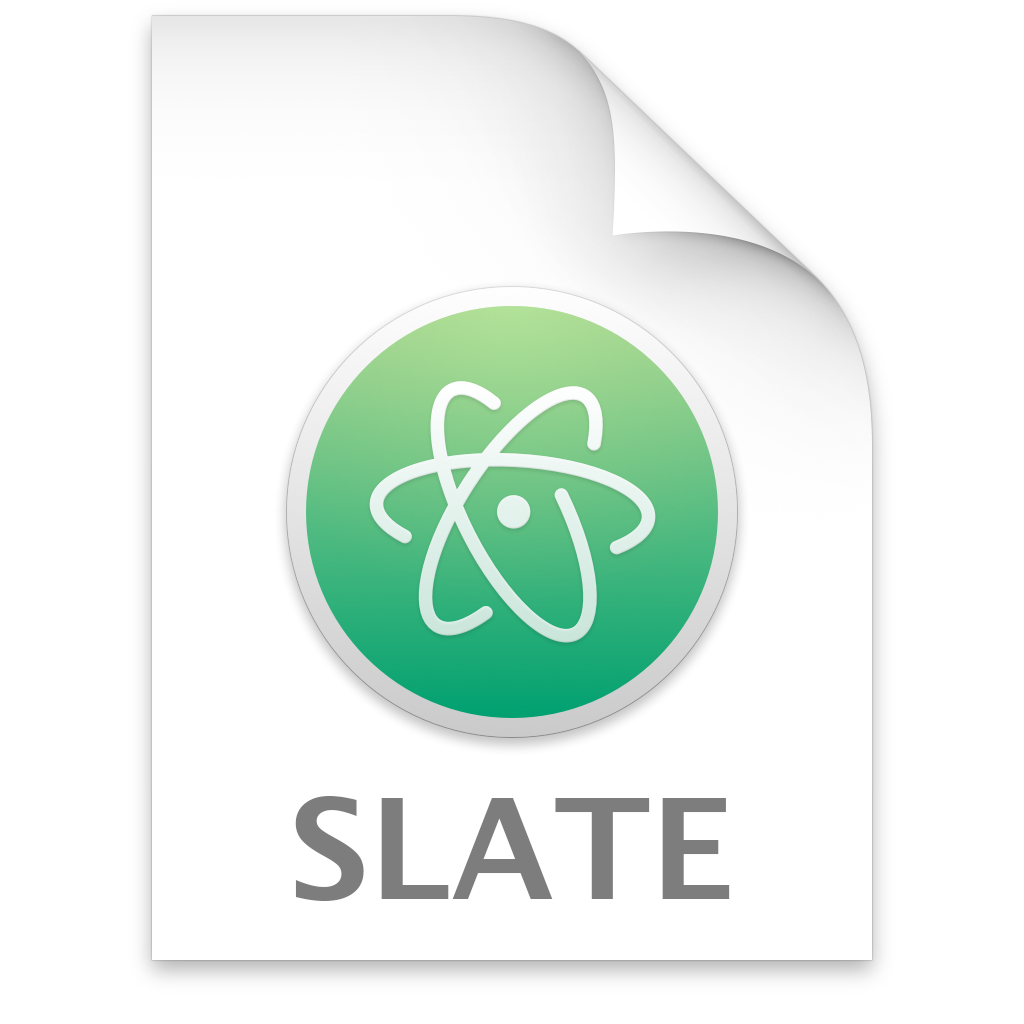
<style>
.page{position:relative;width:1024px;height:1024px;background:#ffffff}
.page>*{position:absolute;margin:0}
.t1{font:140px "LucidaGrande-Bold";color:#7d7d7d}
</style>
<div class="page">
<p class="t1" style="left:295px;top:796px;width:435px;height:105px">SLATE</p>
</div>
